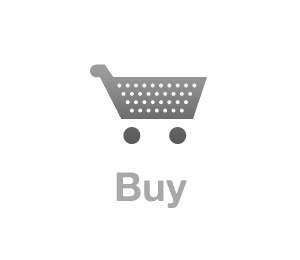
<style>
.page{position:relative;width:300px;height:260px;background:#ffffff}
.page>*{position:absolute;margin:0}
.t1{font:40px "AlteHaasGrotesk_Bold";color:#a8a8a8}
</style>
<div class="page">
<p class="t1" style="left:116px;top:172px;width:71px;height:36px">Buy</p>
</div>
